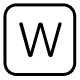
<style>
.page{position:relative;width:80px;height:80px;background:#ffffff}
.page>*{position:absolute;margin:0}
.t1{font:48px "NanumSquareRoundR";color:#000000}
</style>
<div class="page">
<p class="t1" style="left:19px;top:22px;width:43px;height:35px">W</p>
</div>
